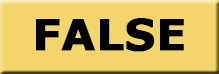
<style>
.page{position:relative;width:219px;height:74px;background:#f4d56b}
.page>*{position:absolute;margin:0}
.t1{font:43px "Verdana-Bold";color:#000000;font-weight:bold}
</style>
<div class="page">
<p class="t1" style="left:36px;top:18px;width:148px;height:34px">FALSE</p>
</div>
